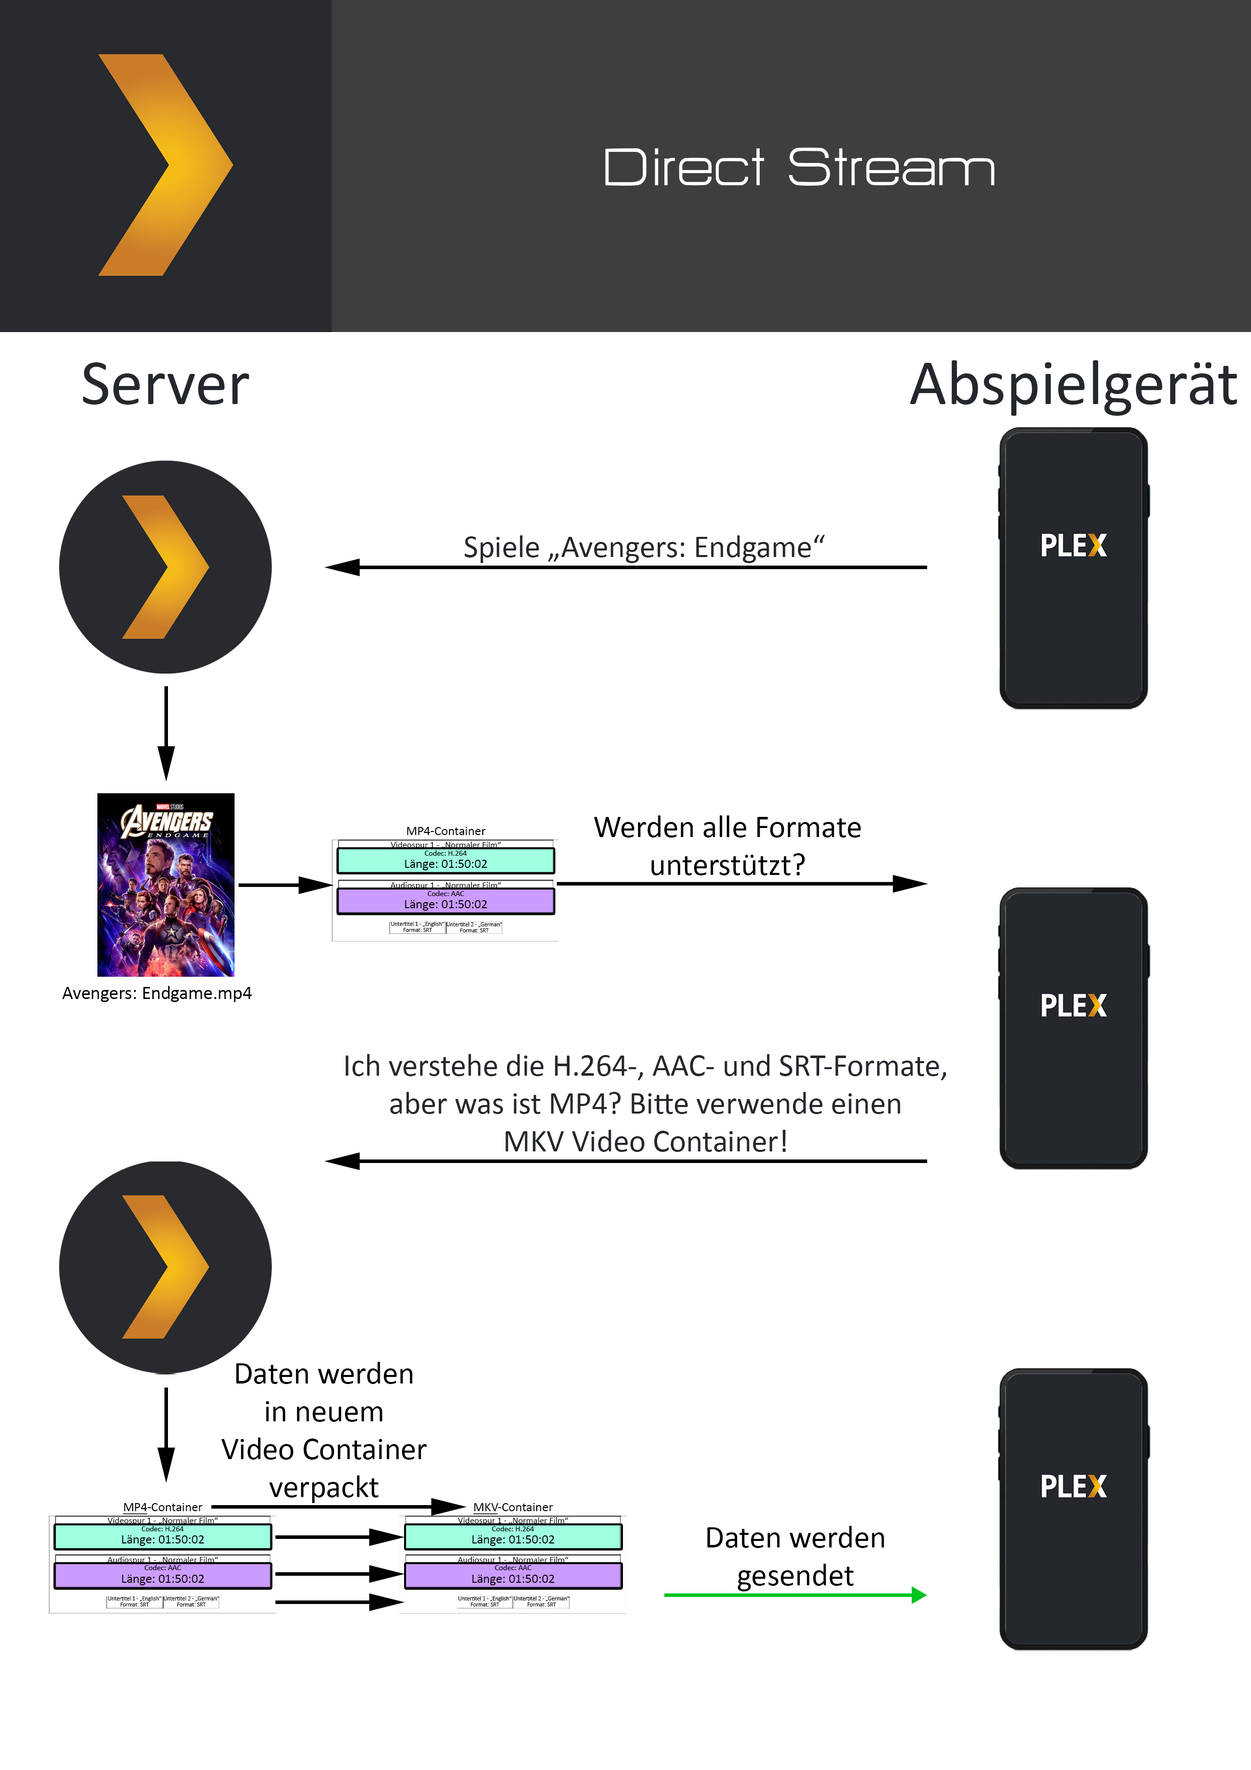
<style>
.page{position:relative;width:1251px;height:1770px;background:#ffffff}
.page>*{position:absolute;margin:0}
.t1{font:65.2px "HURTMOLDPersonalUse-Regular";color:#ffffff}
.t2{font:65.2px "Calibri";color:#24272c}
.t3{font:31.5px "Calibri";color:#24272c}
.t4{font:31.5px "Calibri";color:#000000}
.t5{font:12.9px "Calibri";color:#000000}
.t6{font:9px "Calibri";color:#000000}
.t7{font:7.8px "Calibri";color:#000000}
.t8{font:5.9px "Calibri";color:#000000}
.t9{font:18.9px "Calibri";color:#000000}
.t10{font:12.9px "Calibri";color:#000000;text-decoration:underline}
</style>
<div class="page">
<p class="t1" style="left:605px;top:147px;width:390px;height:39px">Direct Stream</p>
<p class="t2" style="left:83px;top:362px;width:166px;height:43px">Server</p>
<p class="t2" style="left:910px;top:360px;width:327px;height:56px">Abspielgerät</p>
<p class="t3" style="left:465px;top:535px;width:360px;height:28px">Spiele „Avengers: Endgame“</p>
<p class="t4" style="left:594px;top:815px;width:267px;height:60px;text-align:center">Werden alle Formate<br>unterstützt?</p>
<p class="t5" style="left:407px;top:827px;width:79px;height:8px">MP4-Container</p>
<p class="t6" style="left:390px;top:841px;width:111px;height:8px">Videospur 1 - „Normaler Film“</p>
<p class="t7" style="left:425px;top:850px;width:42px;height:6px">Codec: H.264</p>
<p class="t5" style="left:405px;top:860px;width:82px;height:10px">Länge: 01:50:02</p>
<p class="t6" style="left:390px;top:882px;width:111px;height:7px">Audiospur 1 - „Normaler Film“</p>
<p class="t7" style="left:428px;top:890px;width:36px;height:6px">Codec: AAC</p>
<p class="t5" style="left:405px;top:900px;width:82px;height:11px">Länge: 01:50:02</p>
<p class="t8" style="left:391px;top:922px;width:53px;height:5px">Untertitel 1 - „English“</p>
<p class="t8" style="left:404px;top:928px;width:28px;height:4px">Format: SRT</p>
<p class="t8" style="left:446px;top:922px;width:56px;height:5px">Untertitel 2 - „German“</p>
<p class="t8" style="left:460px;top:928px;width:29px;height:4px">Format: SRT</p>
<p class="t9" style="left:62px;top:986px;width:190px;height:16px">Avengers: Endgame.mp4</p>
<p class="t3" style="left:346px;top:1054px;width:600px;height:98px;text-align:center">Ich verstehe die H.264-, AAC- und SRT-Formate,<br>aber was ist MP4? Bitte verwende einen<br>MKV Video Container!</p>
<p class="t4" style="left:221px;top:1361px;width:206px;height:142px;text-align:center">Daten werden<br>in neuem<br>Video Container<br>verpackt</p>
<p class="t5" style="left:123px;top:1503px;width:80px;height:11px"><span class="t10">MP4</span>-Container</p>
<p class="t5" style="left:473px;top:1503px;width:80px;height:11px"><span class="t10">MKV</span>-Container</p>
<p class="t6" style="left:107px;top:1517px;width:111px;height:7px">Videospur 1 - „Normaler Film“</p>
<p class="t6" style="left:458px;top:1517px;width:110px;height:7px">Videospur 1 - „Normaler Film“</p>
<p class="t7" style="left:142px;top:1525px;width:42px;height:6px">Codec: H.264</p>
<p class="t7" style="left:492px;top:1525px;width:42px;height:6px">Codec: H.264</p>
<p class="t4" style="left:707px;top:1525px;width:177px;height:66px;text-align:center">Daten werden<br>gesendet</p>
<p class="t5" style="left:122px;top:1535px;width:82px;height:11px">Länge: 01:50:02</p>
<p class="t5" style="left:472px;top:1535px;width:82px;height:11px">Länge: 01:50:02</p>
<p class="t6" style="left:107px;top:1556px;width:111px;height:8px">Audiospur 1 - „Normaler Film“</p>
<p class="t7" style="left:144px;top:1564px;width:37px;height:6px">Codec: AAC</p>
<p class="t6" style="left:458px;top:1556px;width:110px;height:8px">Audiospur 1 - „Normaler Film“</p>
<p class="t7" style="left:495px;top:1564px;width:37px;height:6px">Codec: AAC</p>
<p class="t5" style="left:122px;top:1574px;width:82px;height:11px">Länge: 01:50:02</p>
<p class="t5" style="left:472px;top:1574px;width:82px;height:11px">Länge: 01:50:02</p>
<p class="t8" style="left:108px;top:1596px;width:53px;height:5px">Untertitel 1 - „English“</p>
<p class="t8" style="left:163px;top:1596px;width:56px;height:5px">Untertitel 2 - „German“</p>
<p class="t8" style="left:458px;top:1596px;width:54px;height:5px">Untertitel 1 - „English“</p>
<p class="t8" style="left:514px;top:1596px;width:56px;height:5px">Untertitel 2 - „German“</p>
<p class="t8" style="left:121px;top:1602px;width:28px;height:4px">Format: SRT</p>
<p class="t8" style="left:177px;top:1602px;width:29px;height:4px">Format: SRT</p>
<p class="t8" style="left:471px;top:1602px;width:28px;height:4px">Format: SRT</p>
<p class="t8" style="left:528px;top:1602px;width:28px;height:4px">Format: SRT</p>
</div>
